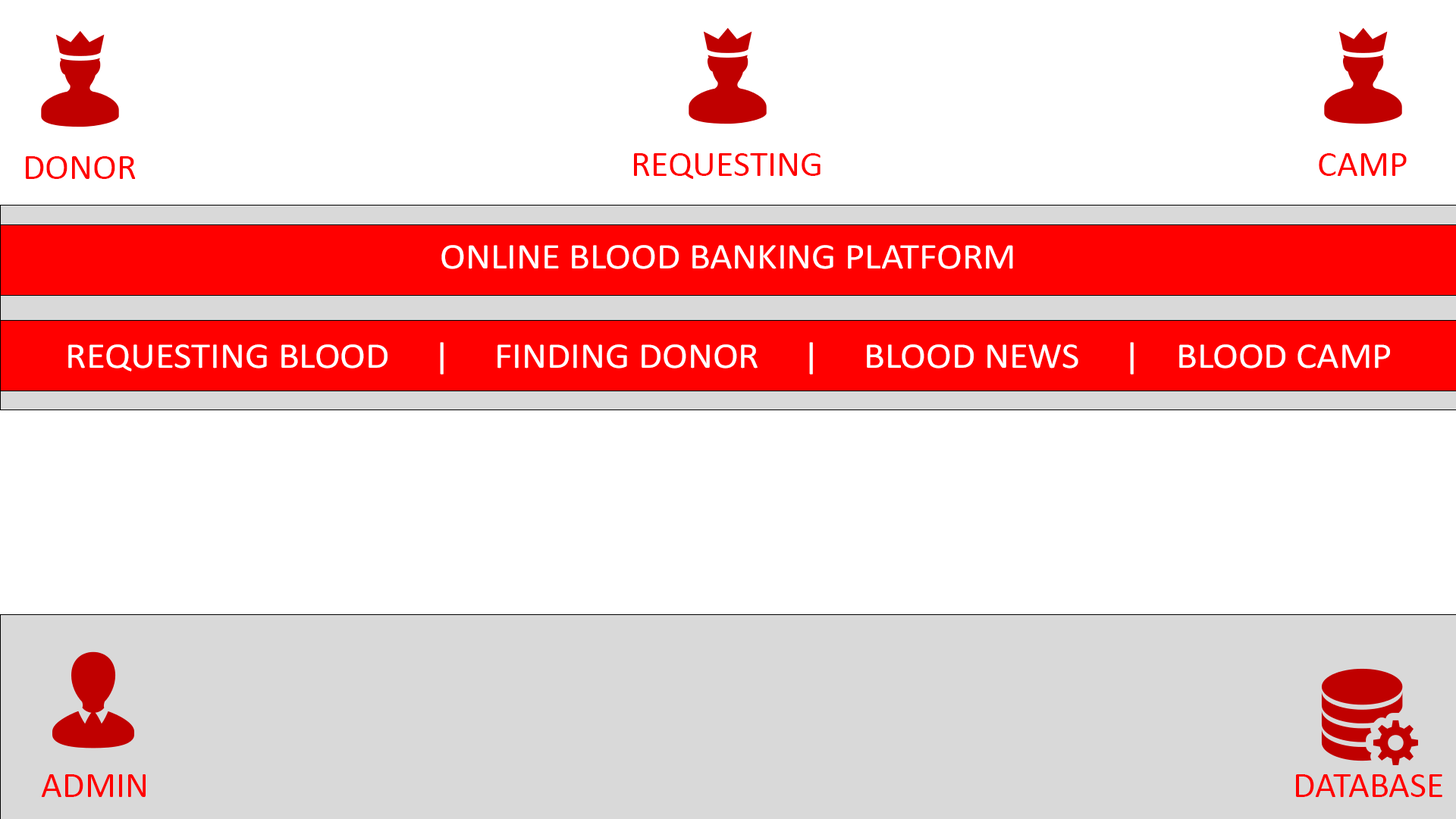
<style>
.page{position:relative;width:1456px;height:819px;background:#ffffff}
.page>*{position:absolute;margin:0}
.t1{font:36.4px "Calibri";color:#ff0000}
.t2{font:36.4px "Calibri";color:#ffffff;scale:1.06 1}
</style>
<div class="page">
<p class="t1" style="left:26px;top:156px;width:110px;height:23px">DONOR</p>
<p class="t1" style="left:634px;top:153px;width:187px;height:26px">REQUESTING</p>
<p class="t1" style="left:1319px;top:153px;width:88px;height:23px">CAMP</p>
<p class="t2" style="left:441px;top:245px;width:572px;height:24px">ONLINE BLOOD BANKING PLATFORM</p>
<p class="t2" style="left:68px;top:342px;width:1322px;height:33px">REQUESTING BLOOD     |     FINDING DONOR     |     BLOOD NEWS     |    BLOOD CAMP</p>
<p class="t1" style="left:41px;top:774px;width:105px;height:23px">ADMIN</p>
<p class="t1" style="left:1296px;top:774px;width:146px;height:23px">DATABASE</p>
</div>
